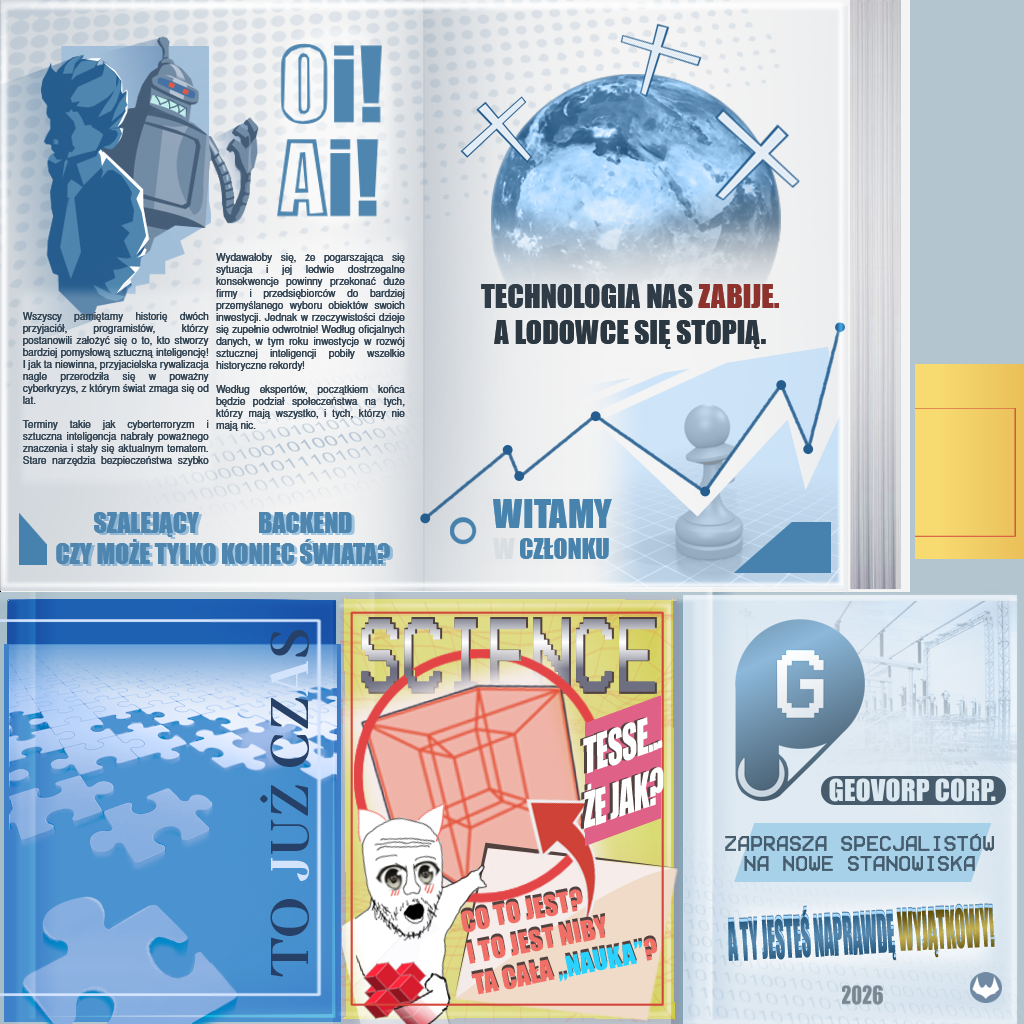
<style>
.page{position:relative;width:1024px;height:1024px}
.page>*{position:absolute;margin:0}
.t1{font:10px "NimbusSanL-Reg";color:#314251}
.t2{font:30px "Impact";color:#2b3741}
.t3{font:30px "Impact";color:#2f3b46}
.t4{font:30px "Impact";color:#8d322c}
.t5{font:25.8px "Impact";color:#4883ad}
.t6{font:36.6px "Impact";color:#4883ad}
.t7{font:25.8px "Impact";color:#d9dee2}
.t8{font:25.8px "Impact";color:#4e86af}
.t9{font:53.1px "MonomakhUnicode";color:#274068}
.t10{font:53.1px "MonomakhUnicode";color:#d4e3fc}
.t11{font:45.4px "Impact";letter-spacing:-0.025em;color:#ffffff;scale:0.69 1}
.t12{font:17.2px "BetterVCRCJK";color:#465c6d}
.t13{font:26.4px "Impact";color:#f06f66}
.t14{font:26.4px "Impact";color:#2ad2ff}
.t15{font:49.7px "Impact";color:#417399;scale:0.37 1}
.t16{font:49.7px "Impact";scale:0.37 1}
</style>
<div class="page">
<p class="t1" style="left:216px;top:253px;width:189px;height:178px;text-align:justify">Wydawałoby się, że pogarszająca się sytuacja i jej ledwie dostrzegalne konsekwencje powinny przekonać duże firmy i przedsiębiorców do bardziej przemyślanego wyboru obiektów swoich inwestycji. Jednak w rzeczywistości dzieje się zupełnie odwrotnie! Według oficjalnych danych, w tym roku inwestycje w rozwój sztucznej inteligencji pobiły wszelkie historyczne rekordy!   <br><br>Według ekspertów, początkiem końca będzie podział społeczeństwa na tych, którzy mają wszystko, i tych, którzy nie mają nic.</p>
<p class="t2" style="left:481px;top:284px;width:298px;height:65px;text-align:center"><span class="t3">TECHNOLOGIA NAS </span><span class="t4">ZABIJE.<br></span>A LODOWCE SIĘ STOPIĄ.</p>
<p class="t1" style="left:22px;top:312px;width:187px;height:154px;text-align:justify">Wszyscy pamiętamy historię dwóch przyjaciół, programistów, którzy postanowili założyć się o to, kto stworzy bardziej pomysłową sztuczną inteligencję! I jak ta niewinna, przyjacielska rywalizacja nagle przerodziła się w poważny cyberkryzys, z którym świat zmaga się od lat.          <br><br>Terminy takie jak cyberterroryzm i sztuczna inteligencja nabrały poważnego znaczenia i stały się aktualnym tematem. Stare narzędzia bezpieczeństwa szybko tracą na znaczeniu. A rynki technologiczne i pracy przechodzą głęboki kryzys.</p>
<p class="t5" style="left:493px;top:499px;width:119px;height:60px"><span class="t6">WITAMY<br></span><span class="t7">W </span>CZŁONKU</p>
<p class="t8" style="left:56px;top:512px;width:334px;height:52px;text-align:center">SZALEJĄCY             BACKEND<br>CZY MOŻE TYLKO KONIEC ŚWIATA?</p>
<p class="t9" style="left:260px;top:630px;width:49px;height:347px;rotate:-90deg">TO <span class="t10">J</span>UŻ CZ<span class="t10">A</span>S</p>
<p class="t11" style="left:583px;top:717px;width:81px;height:112px;rotate:-19deg">TESSE...<br>ŻE JAK?</p>
<p class="t12" style="left:725px;top:833px;width:269px;height:38px;text-align:center">ZAPRASZA SPECJALISTÓW<br>NA NOWE STANOWISKA</p>
<p class="t13" style="left:460px;top:889px;width:197px;height:106px;rotate:-11deg">CO TO JEST?<br>I TO JEST NIBY<br>TA CAŁA <span class="t14">„NAUKA”</span>?</p>
<p class="t15" style="left:728px;top:909px;width:169px;height:52px;rotate:-3deg">A TY JESTEŚ NAPRAWDĘ</p>
<p class="t16" style="left:896px;top:907px;width:99px;height:51px;rotate:-3deg">WYJĄTKOWY!</p>
</div>
